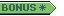
<style>
.page{position:relative;width:64px;height:16px;background:#86c06c}
.page>*{position:absolute;margin:0}
.t1{font:8px "BetterVCRCJK";letter-spacing:0.127em;color:#306850}
</style>
<div class="page">
<p class="t1" style="left:2px;top:4px;width:34px;height:7px">BONUS</p>
</div>
